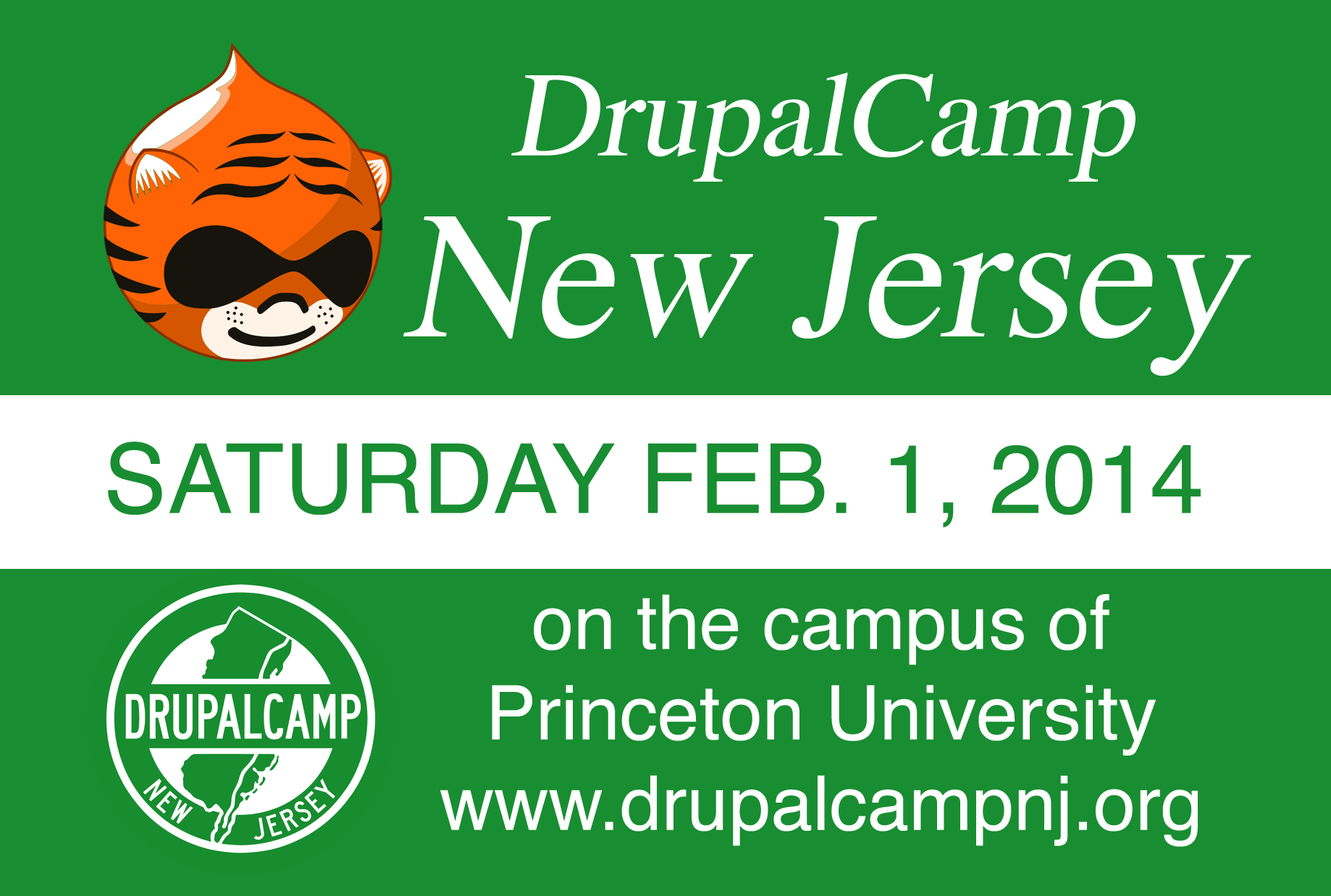
<style>
.page{position:relative;width:1331px;height:896px;background:#198d31}
.page>*{position:absolute;margin:0}
.t1{font:120.7px/181px "Times-Roman";color:#ffffff;font-style:italic}
.t2{font:181px/181px "Times-Roman";color:#ffffff;font-style:italic}
.t3{font:96.5px "Helvetica";color:#198d31;text-transform:uppercase}
.t4{font:75.4px "Helvetica";color:#ffffff}
</style>
<div class="page">
<p class="t1" style="left:403px;top:72px;width:848px;height:304px;text-align:center">DrupalCamp<br><span class="t2">New Jersey</span></p>
<p class="t3" style="left:108px;top:442px;width:1092px;height:86px">Saturday Feb. 1, 2014</p>
<p class="t4" style="left:440px;top:594px;width:757px;height:253px;text-align:center">on the campus of<br>Princeton University<br>www.drupalcampnj.org</p>
</div>
